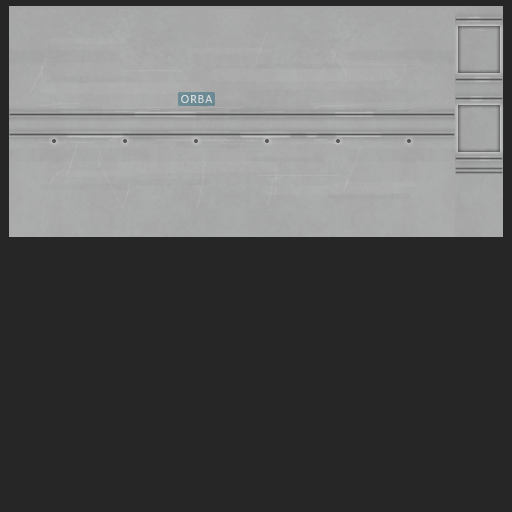
<style>
.page{position:relative;width:512px;height:512px;background:#262626}
.page>*{position:absolute;margin:0}
.t1{font:11px "SegoeUI";letter-spacing:0.1em;color:#d4dadb}
</style>
<div class="page">
<p class="t1" style="left:181px;top:95px;width:32px;height:8px">ORBA</p>
</div>
